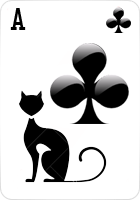
<style>
.page{position:relative;width:140px;height:200px;background:#ffffff}
.page>*{position:absolute;margin:0}
.t1{font:26px "CardCharacters";color:#000000}
</style>
<div class="page">
<p class="t1" style="left:10px;top:8px;width:16px;height:22px">A</p>
</div>
